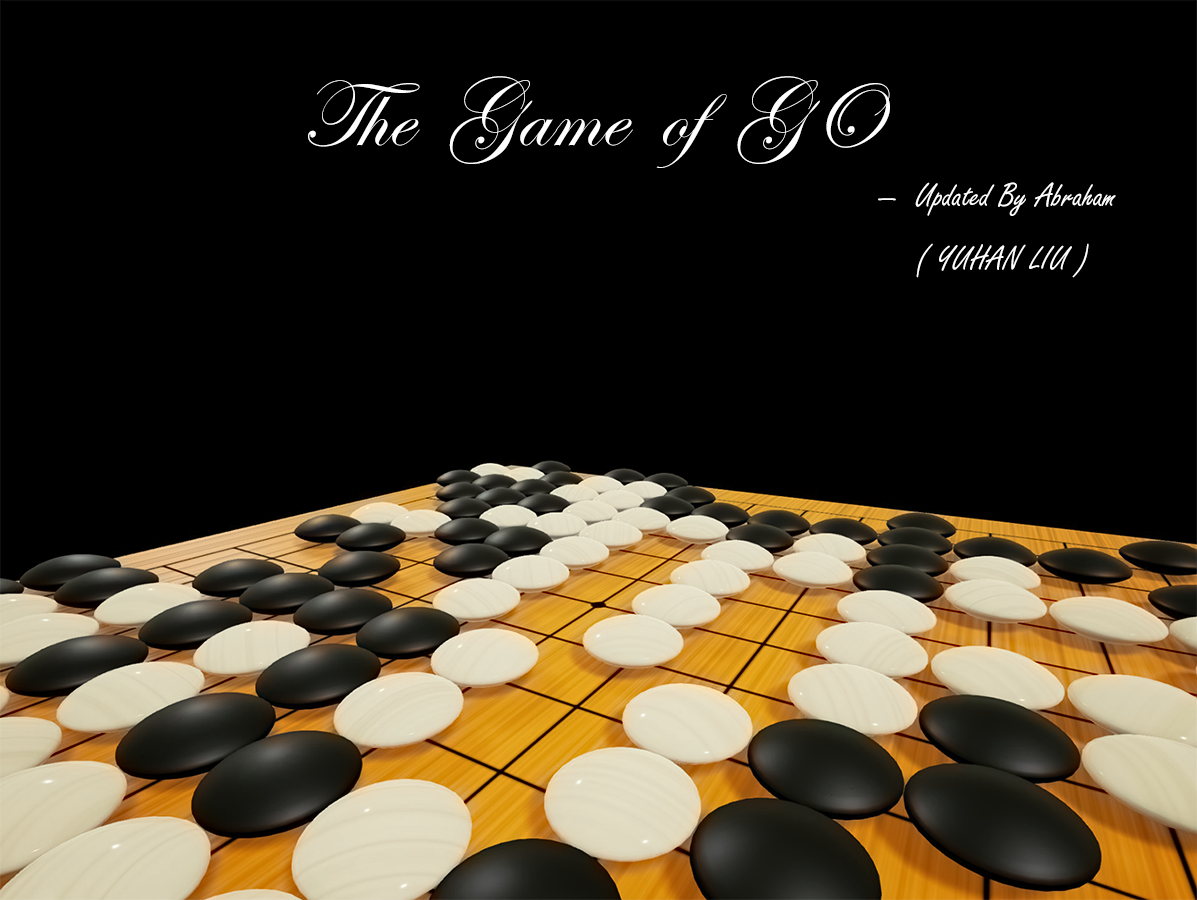
<style>
.page{position:relative;width:1197px;height:900px;background:#000000}
.page>*{position:absolute;margin:0}
.t1{font:96px "EdwardianScriptITC";color:#ffffff}
.t2{font:36px "FreestyleScript-Regular";color:#ffffff}
</style>
<div class="page">
<p class="t1" style="left:308px;top:76px;width:582px;height:92px">The  Game  of  GO</p>
<p class="t2" style="left:878px;top:182px;width:238px;height:96px">—  Updated By Abraham<br> ( YUHAN LIU )</p>
</div>
